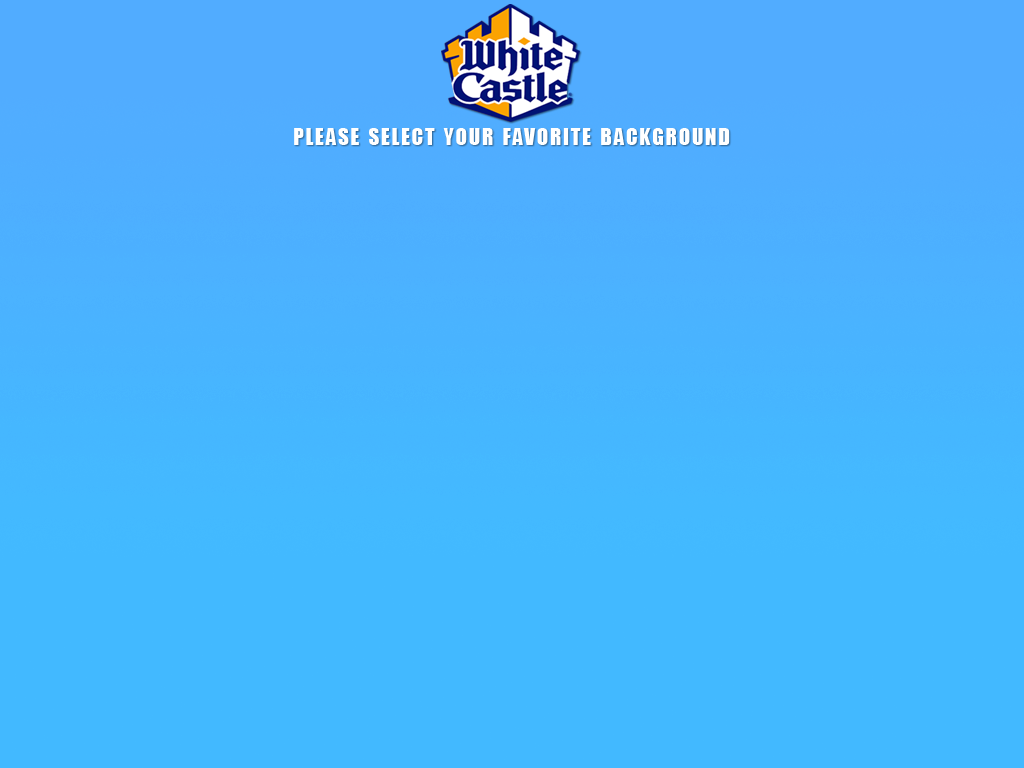
<style>
.page{position:relative;width:1024px;height:768px;background:#42b9ff}
.page>*{position:absolute;margin:0}
.t1{font:30px "Impact";letter-spacing:0.07em;color:#ffffff;font-variant:small-caps}
</style>
<div class="page">
<p class="t1" style="left:294px;top:128px;width:436px;height:17px">please select your favorite background</p>
</div>
